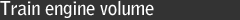
<style>
.page{position:relative;width:240px;height:20px;background:#333333}
.page>*{position:absolute;margin:0}
.t1{font:19px "BellGothicStd-Bold";letter-spacing:-0.025em;color:#ffffff}
</style>
<div class="page">
<p class="t1" style="left:0px;top:0px;width:154px;height:18px">Train engine volume</p>
</div>
